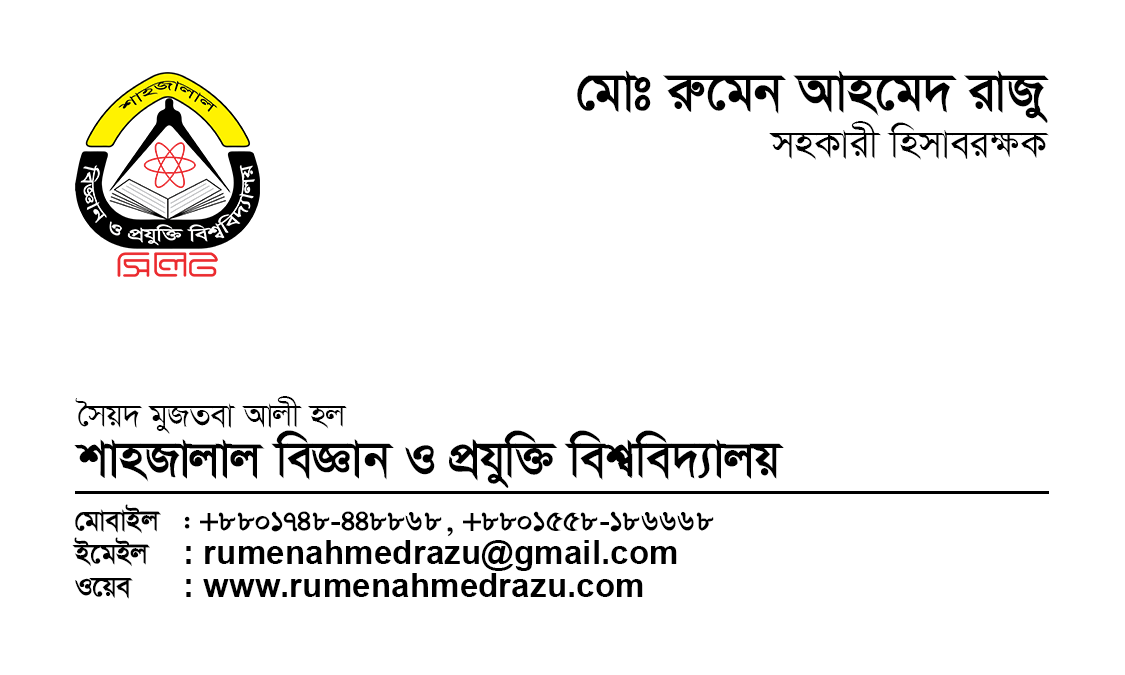
<style>
.page{position:relative;width:1125px;height:675px;background:#ffffff}
.page>*{position:absolute;margin:0}
.t1{font:62.5px "SutonnyMJ-Bold";color:#000000}
.t2{font:45.8px "SutonnyMJ-Regular";color:#000000}
.t3{font:58.3px/50px "SutonnyMJ-Bold";color:#000000}
.t4{font:37.5px/50px "SutonnyMJ-Regular";color:#000000}
.t5{font:33.3px/33.3px "SutonnyMJ-Bold";color:#000000}
.t6{font:33.3px/33.3px "Arial-BoldMT";color:#000000}
</style>
<div class="page">
<p class="t1" style="left:577px;top:70px;width:472px;height:53px">†gvt iæ‡gb Avn‡g` ivRy</p>
<p class="t2" style="left:769px;top:121px;width:280px;height:39px">mnKvix wnmveiÿK</p>
<p class="t3" style="left:74px;top:396px;width:710px;height:92px"><span class="t4">ˆmq` gyRZev Avjx nj<br></span>kvnRvjvj weÁvb I cÖhyw³ wek^we`¨vjq</p>
<p class="t5" style="left:72px;top:504px;width:642px;height:95px">†gvevBj : +8801748-448868, +8801558-186668<br>B‡gBj <span class="t6">: rumenahmedrazu@gmail.com<br></span>I‡qe<span class="t6">  : www.rumenahmedrazu.com</span></p>
</div>
